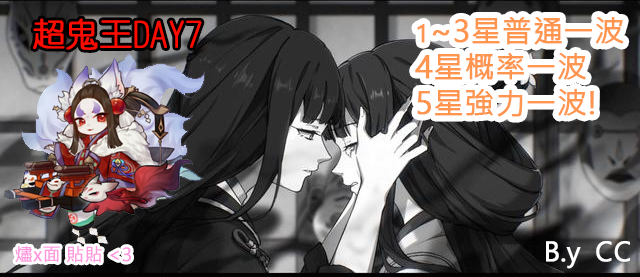
<style>
.page{position:relative;width:640px;height:277px}
.page>*{position:absolute;margin:0}
.t1{font:30px "MicrosoftJhengHeiUIRegular";color:#ff954f;font-weight:bold}
.t2{font:24px "MicrosoftJhengHeiUIRegular";color:#ff954f;font-weight:bold}
.t3{font:32.9px "YenRound-Medium";color:#fb0c00;font-weight:bold}
.t4{font:26px "MicrosoftJhengHeiRegular";color:#ffffff;font-weight:bold}
</style>
<div class="page">
<p class="t1" style="left:415px;top:17px;width:209px;height:100px"><span class="t2">1</span>~3星普通一波<br>4星概率一波<br>5星強力一波!</p>
<p class="t3" style="left:33px;top:18px;width:169px;height:32px">超鬼王DAY7</p>
<p class="t4" style="left:546px;top:241px;width:84px;height:28px">B.y  CC</p>
</div>
